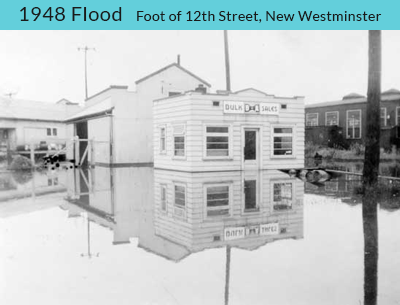
<style>
.page{position:relative;width:400px;height:305px}
.page>*{position:absolute;margin:0}
.t1{font:20px "Lato-Regular";letter-spacing:0.025em;color:#1a1a1a}
.t2{font:14px "Lato-Regular";letter-spacing:0.025em;color:#1a1a1a}
</style>
<div class="page">
<p class="t1" style="left:20px;top:7px;width:102px;height:14px">1948 Flood</p>
<p class="t2" style="left:137px;top:11px;width:245px;height:12px">Foot of 12th Street, New Westminster</p>
</div>
